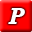
<style>
.page{position:relative;width:32px;height:32px;background:#ff0000}
.page>*{position:absolute;margin:0}
.t1{font:24px "BookmanOldStyle-BoldItalic";color:#ffffff}
</style>
<div class="page">
<p class="t1" style="left:8px;top:8px;width:17px;height:16px">P</p>
</div>
